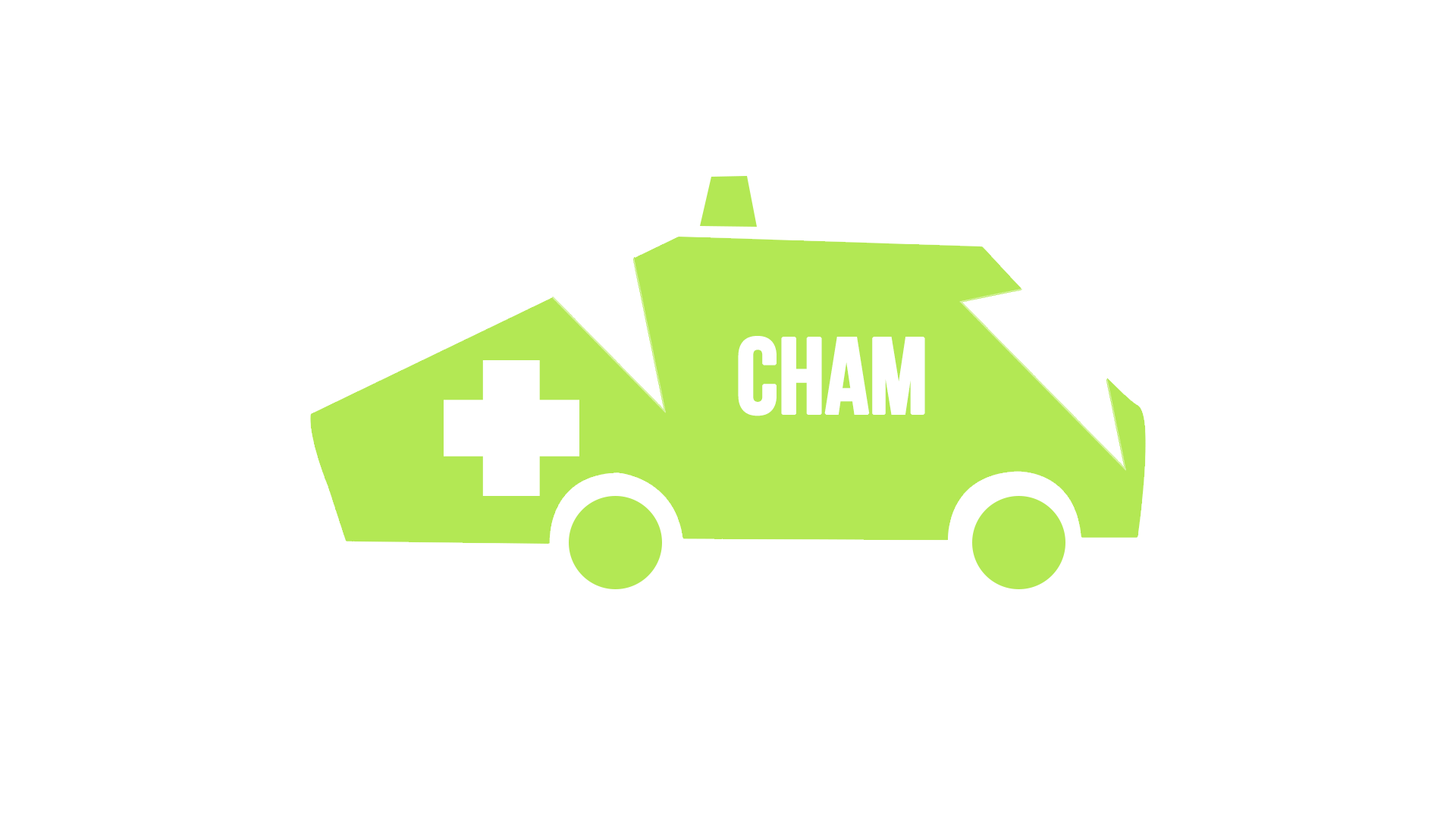
<style>
.page{position:relative;width:1456px;height:819px;background:#ffffff}
.page>*{position:absolute;margin:0}
.t1{font:107.2px "BebasNeueBold";letter-spacing:-0.02em;color:#ffffff;font-weight:bold}
</style>
<div class="page">
<p class="t1" style="left:738px;top:336px;width:187px;height:80px">CHAM</p>
</div>
